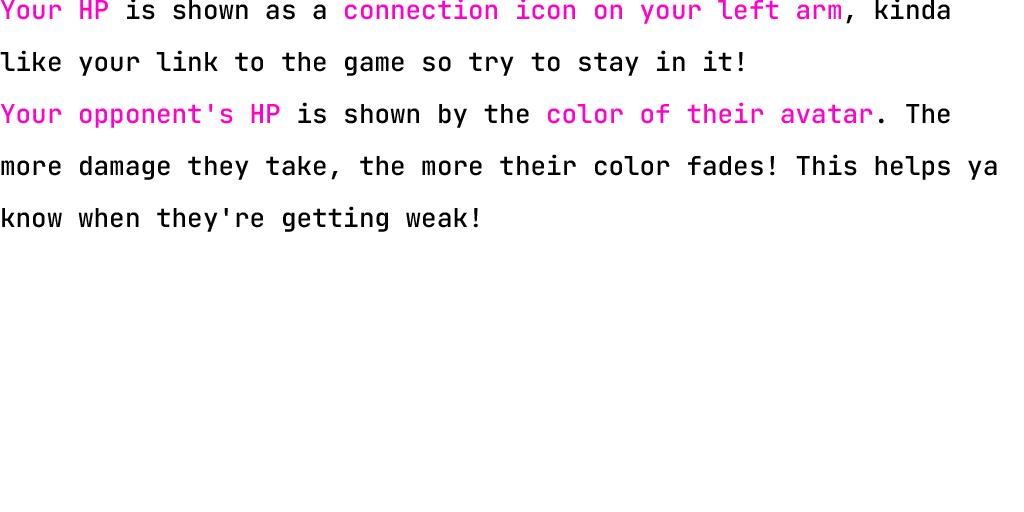
<style>
.page{position:relative;width:1024px;height:512px;background:#ffffff}
.page>*{position:absolute;margin:0}
.t1{font:26px/52px "JetBrainsMonoRoman-Medium";color:#000000}
.t2{font:26px/52px "JetBrainsMonoRoman-Medium";color:#ff01c8}
</style>
<div class="page">
<p class="t1" style="left:0px;top:0px;width:997px;height:232px"><span class="t2">Your HP</span> is shown as a <span class="t2">connection icon on your left arm</span>, kinda like your link to the game so try to stay in it! <br><span class="t2">Your opponent's HP</span> is shown by the <span class="t2">color of their avatar</span>. The more damage they take, the more their color fades! This helps ya know when they're getting weak!</p>
</div>
